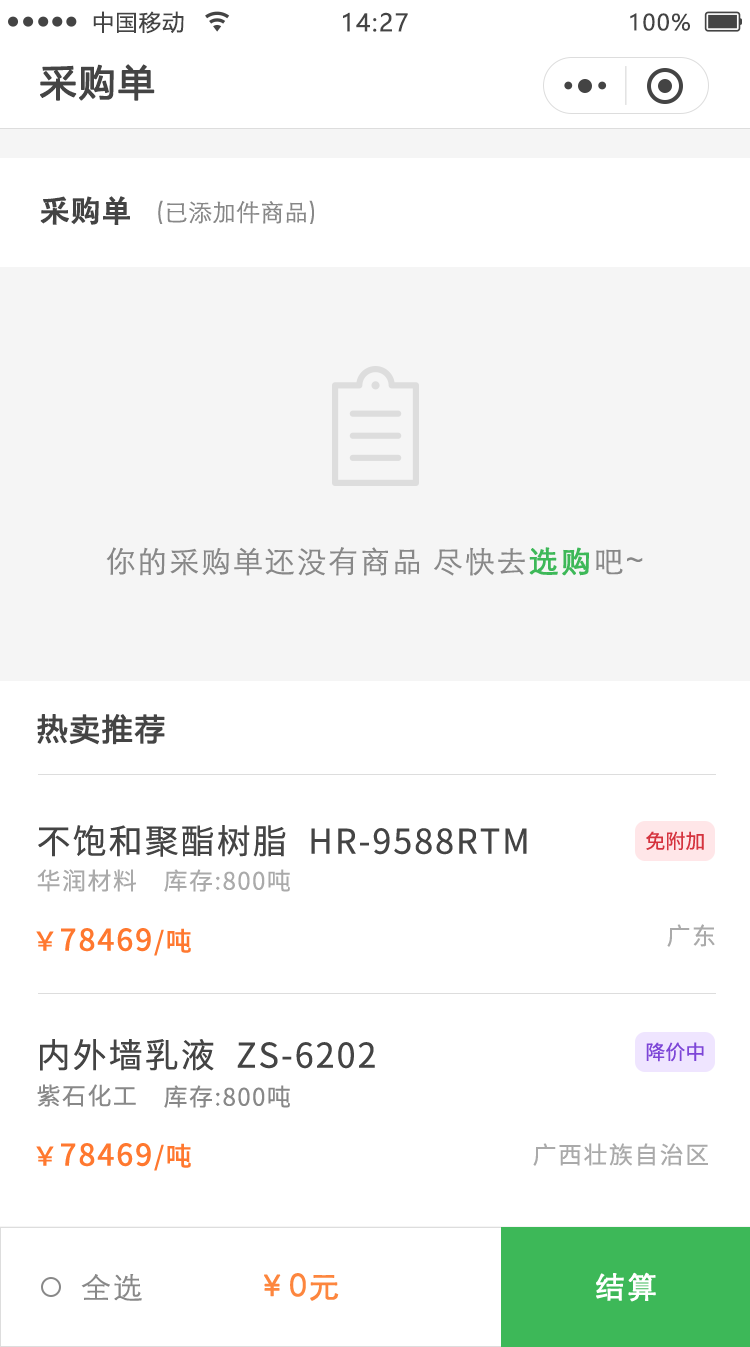
<style>
.page{position:relative;width:750px;height:1347px;background:#ffffff}
.page>*{position:absolute;margin:0}
.t1{font:22px "MicrosoftYaHei";letter-spacing:0.06em;color:#444444}
.t2{font:24px "MicrosoftYaHei";letter-spacing:0.06em;color:#444444}
.t3{font:36px "MicrosoftYaHei";letter-spacing:0.06em;color:#444444;font-weight:bold}
.t4{font:30px "AdobeHeitiStd-Regular";color:#444444;font-weight:bold}
.t5{font:24px "STXihei";color:#888888}
.t6{font:30px "STXihei";letter-spacing:0.06em;color:#888888}
.t7{font:30px "STXihei";letter-spacing:0.06em;color:#3db858;font-weight:bold}
.t8{font:30px "MicrosoftYaHei";letter-spacing:0.06em;color:#444444;font-weight:bold}
.t9{font:34px "NotoSansCJKsc-Regular";letter-spacing:0.06em;color:#444444}
.t10{font:20px "NotoSansCJKsc-Regular";color:#d5333e}
.t11{font:24px "NotoSansCJKsc-Regular";letter-spacing:0.06em;color:#aaaaaa}
.t12{font:30px "NotoSansCJKsc-Medium";letter-spacing:0.06em;color:#ff782f}
.t13{font:26px "NotoSansCJKsc-Medium";letter-spacing:0.06em;color:#ff782f}
.t14{font:20px "NotoSansCJKsc-Regular";color:#7d46d7}
.t15{font:24px "NotoSansCJKsc-Regular";letter-spacing:0.06em;color:#888888}
.t16{font:30px "STXihei";letter-spacing:0.06em;color:#fd863e;font-weight:bold}
.t17{font:29.9px "STXihei";letter-spacing:0.06em;color:#ffffff;font-weight:bold}
</style>
<div class="page">
<p class="t1" style="left:93px;top:11px;width:91px;height:23px">中国移动</p>
<p class="t2" style="left:343px;top:12px;width:65px;height:20px">14:27</p>
<p class="t1" style="left:630px;top:13px;width:60px;height:18px">100%</p>
<p class="t3" style="left:40px;top:64px;width:115px;height:37px">采购单</p>
<p class="t4" style="left:40px;top:196px;width:90px;height:29px">采购单</p>
<p class="t5" style="left:158px;top:200px;width:156px;height:24px">(已添加件商品)</p>
<p class="t6" style="left:106px;top:547px;width:537px;height:29px">你的采购单还没有商品 尽快去<span class="t7">选购</span>吧~</p>
<p class="t8" style="left:37px;top:714px;width:128px;height:31px">热卖推荐</p>
<p class="t9" style="left:38px;top:825px;width:489px;height:32px">不饱和聚酯树脂  HR-9588RTM</p>
<p class="t10" style="left:646px;top:831px;width:58px;height:20px">免附加</p>
<p class="t11" style="left:37px;top:869px;width:99px;height:23px">华润材料</p>
<p class="t11" style="left:164px;top:869px;width:126px;height:23px">库存:800吨</p>
<p class="t12" style="left:36px;top:928px;width:155px;height:28px"><span class="t13">￥</span>78469<span class="t13">/吨</span></p>
<p class="t11" style="left:667px;top:924px;width:48px;height:23px">广东</p>
<p class="t9" style="left:40px;top:1039px;width:335px;height:32px">内外墙乳液  ZS-6202</p>
<p class="t14" style="left:646px;top:1042px;width:58px;height:20px">降价中</p>
<p class="t15" style="left:37px;top:1084px;width:99px;height:23px">紫石化工</p>
<p class="t15" style="left:164px;top:1085px;width:126px;height:23px">库存:800吨</p>
<p class="t12" style="left:36px;top:1143px;width:155px;height:28px"><span class="t13">￥</span>78469<span class="t13">/吨</span></p>
<p class="t11" style="left:533px;top:1143px;width:175px;height:23px">广西壮族自治区</p>
<p class="t6" style="left:81px;top:1274px;width:61px;height:27px">全选</p>
<p class="t16" style="left:264px;top:1273px;width:75px;height:28px">￥0元</p>
<p class="t17" style="left:596px;top:1272px;width:60px;height:30px">结算</p>
</div>
